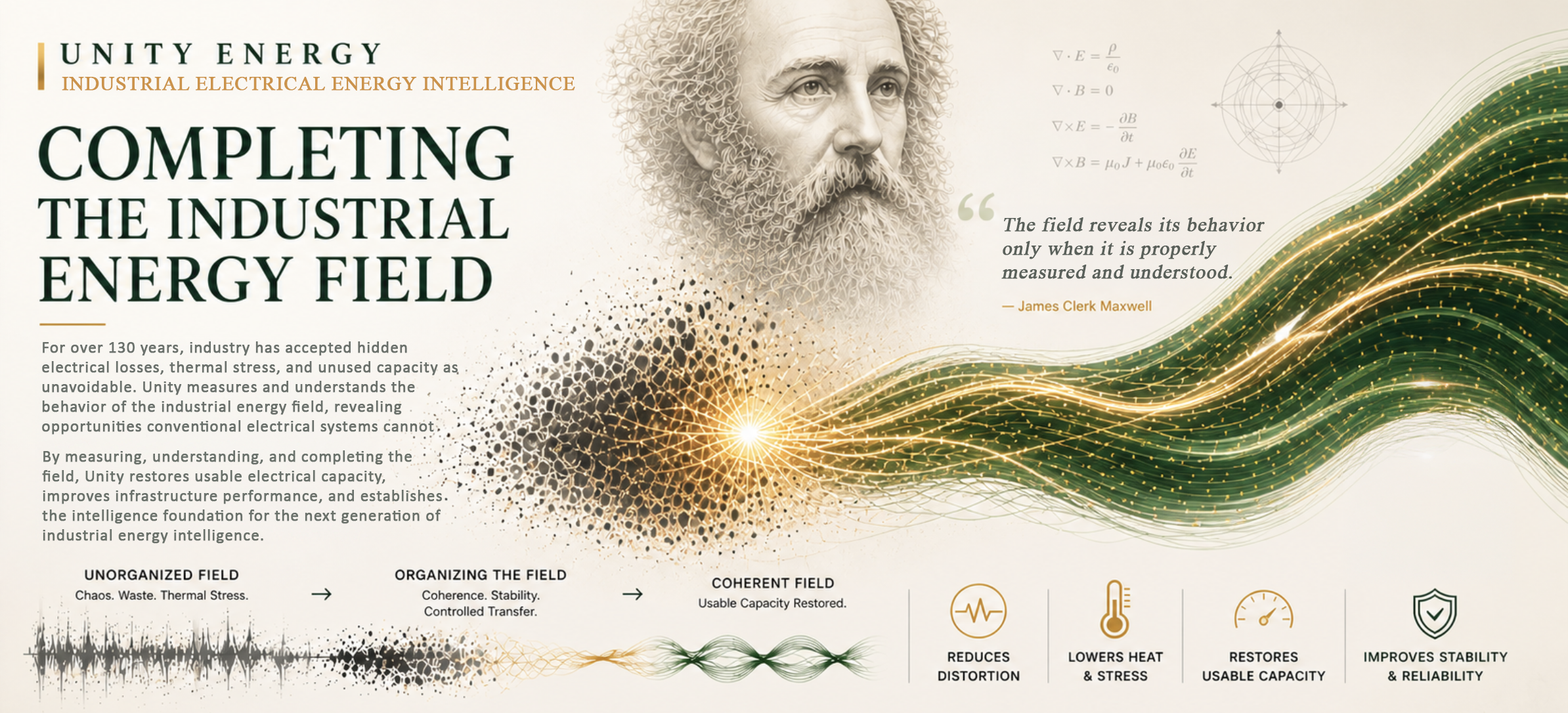
<style>
.page{position:relative;width:1568px;height:713px}
.page>*{position:absolute;margin:0}
.t1{font:19.7px "TimesNewRomanPSMT";letter-spacing:0.025em;color:#cb934b;font-weight:bold}
.t2{font:19.7px "TimesNewRomanPSMT";letter-spacing:0.025em;color:#59605a;font-weight:bold;font-style:italic}
.t3{font:16.4px "Calibri";letter-spacing:0.025em;color:#6a706b;font-weight:bold}
.t4{font:16.4px "Calibri";letter-spacing:0.025em;color:#6a716b;font-weight:bold}
</style>
<div class="page">
<p class="t1" style="left:62px;top:77px;width:513px;height:14px">INDUSTRIAL ELECTRICAL ENERGY INTELLIGENCE</p>
<p class="t2" style="left:1001px;top:217px;width:264px;height:62px">The field reveals its behavior only when it is properly measured and understood.</p>
<p class="t3" style="left:42px;top:341px;width:416px;height:94px">For over 130 years, industry has accepted hidden electrical losses, thermal stress, and unused capacity as unavoidable. Unity measures and understands the behavior of the industrial energy field, revealing opportunities conventional electrical systems cannot detect.</p>
<p class="t4" style="left:42px;top:450px;width:400px;height:94px">By measuring, understanding, and completing the field, Unity restores usable electrical capacity, improves infrastructure performance, and establishes the intelligence foundation for the next generation of industrial energy intelligence.</p>
</div>
